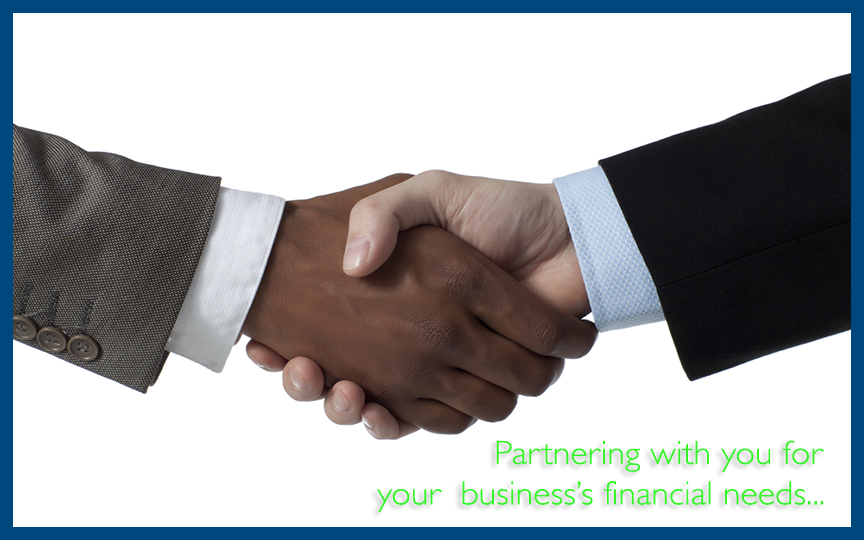
<style>
.page{position:relative;width:864px;height:540px;background:#ffffff}
.page>*{position:absolute;margin:0}
.t1{font:33.7px "GillSans-Light";color:#33f525;scale:1.07 1}
</style>
<div class="page">
<p class="t1" style="left:377px;top:440px;width:447px;height:73px;text-align:right">Partnering with you for <br>your  business’s financial needs...</p>
</div>
